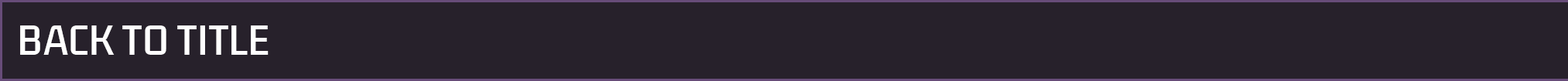
<style>
.page{position:relative;width:1568px;height:81px;background:#27212b}
.page>*{position:absolute;margin:0}
.t1{font:37.1px "KdamThmorPro-Regular";color:#ffffff}
</style>
<div class="page">
<p class="t1" style="left:20px;top:26px;width:249px;height:29px">BACK TO TITLE</p>
</div>
